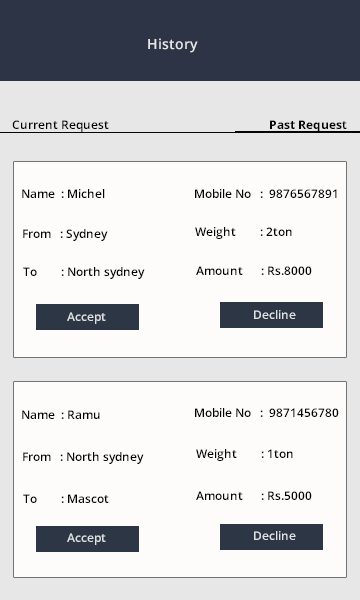
<style>
.page{position:relative;width:360px;height:600px;background:#fefbfb}
.page>*{position:absolute;margin:0}
.t1{font:14px "OpenSans-Semibold";color:#e7e7e7}
.t2{font:12px "OpenSans-Semibold";color:#000000}
.t3{font:12px "OpenSans-Bold";color:#000000}
.t4{font:12px "OpenSans-Semibold";color:#e0e1e2}
</style>
<div class="page">
<p class="t1" style="left:148px;top:38px;width:50px;height:15px">History</p>
<p class="t2" style="left:12px;top:120px;width:97px;height:12px">Current Request</p>
<p class="t3" style="left:270px;top:120px;width:77px;height:12px">Past Reques<span class="t2">t</span></p>
<p class="t2" style="left:22px;top:189px;width:83px;height:9px">Name  : Michel</p>
<p class="t2" style="left:195px;top:189px;width:142px;height:9px">Mobile No   :  9876567891</p>
<p class="t2" style="left:23px;top:229px;width:85px;height:12px">From   : Sydney</p>
<p class="t2" style="left:195px;top:227px;width:97px;height:12px">Weight        : 2ton</p>
<p class="t2" style="left:23px;top:267px;width:122px;height:12px">To        : North sydney</p>
<p class="t2" style="left:196px;top:266px;width:116px;height:9px">Amount      : Rs.8000</p>
<p class="t4" style="left:67px;top:312px;width:39px;height:12px">Accept</p>
<p class="t4" style="left:254px;top:310px;width:42px;height:9px">Decline</p>
<p class="t2" style="left:22px;top:410px;width:78px;height:9px">Name  : Ramu</p>
<p class="t2" style="left:195px;top:408px;width:144px;height:9px">Mobile No   :  9871456780</p>
<p class="t2" style="left:196px;top:449px;width:97px;height:12px">Weight        : 1ton</p>
<p class="t2" style="left:23px;top:452px;width:121px;height:12px">From   : North sydney</p>
<p class="t2" style="left:23px;top:494px;width:86px;height:9px">To        : Mascot</p>
<p class="t2" style="left:196px;top:491px;width:116px;height:9px">Amount      : Rs.5000</p>
<p class="t4" style="left:67px;top:533px;width:39px;height:12px">Accept</p>
<p class="t4" style="left:254px;top:531px;width:42px;height:9px">Decline</p>
</div>
